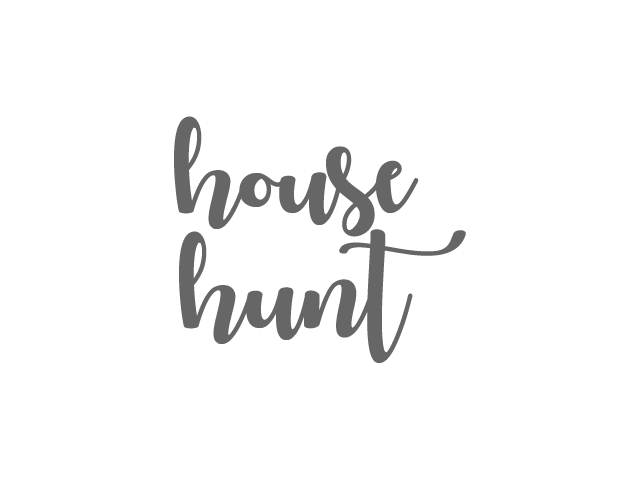
<style>
.page{position:relative;width:640px;height:480px;background:#ffffff}
.page>*{position:absolute;margin:0}
.t1{font:104.2px/115px "AutumninNovember";color:#666666}
</style>
<div class="page">
<p class="t1" style="left:174px;top:116px;width:292px;height:248px;text-align:center">house<br>hunt</p>
</div>
